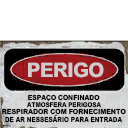
<style>
.page{position:relative;width:128px;height:128px;background:#ffffff}
.page>*{position:absolute;margin:0}
.t1{font:20px "MHeiPRC-Xbold";letter-spacing:-0.04em;color:#cecbce}
.t2{font:6.4px "MHeiPRC-Xbold";color:#000000;scale:0.92 1}
.t3{font:7px "MHeiPRC-Xbold";color:#000000;scale:0.92 1}
.t4{font:7px "MHeiPRC-Xbold";color:#000000;scale:0.95 1}
.t5{font:7px "MHeiPRC-Xbold";color:#000000;scale:0.87 1}
</style>
<div class="page">
<p class="t1" style="left:28px;top:62px;width:76px;height:16px">PERIGO</p>
<p class="t2" style="left:27px;top:102px;width:74px;height:6px">ATMOSFERA PERIGOSA</p>
<p class="t3" style="left:28px;top:94px;width:72px;height:7px">ESPACO CONFINADO</p>
<p class="t4" style="left:2px;top:108px;width:124px;height:7px">RESPIRADOR COM FORNECIMENTO</p>
<p class="t5" style="left:5px;top:116px;width:117px;height:7px">DE AR NESSESARIO PARA ENTRADA</p>
</div>
